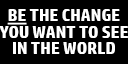
<style>
.page{position:relative;width:128px;height:64px;background:#000000}
.page>*{position:absolute;margin:0}
.t1{font:17.5px/16.7px "HPSimplified-Bold";letter-spacing:-0.01em;color:#ffffff}
.t2{font:17.5px/16.7px "HPSimplified-Bold";letter-spacing:-0.01em;color:#ffffff;text-decoration:underline}
</style>
<div class="page">
<p class="t1" style="left:0px;top:9px;width:128px;height:45px;text-align:center"><span class="t2">BE</span> THE CHANGE<br>YOU WANT TO SEE<br>IN THE WORLD</p>
</div>
